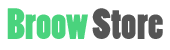
<style>
.page{position:relative;width:170px;height:50px;background:#ffffff}
.page>*{position:absolute;margin:0}
.t1{font:41px "PoplarStd";color:#4ad37d}
.t2{font:41px "PoplarStd";color:#555555}
</style>
<div class="page">
<p class="t1" style="left:7px;top:8px;width:156px;height:31px">Broow <span class="t2">Store</span></p>
</div>
